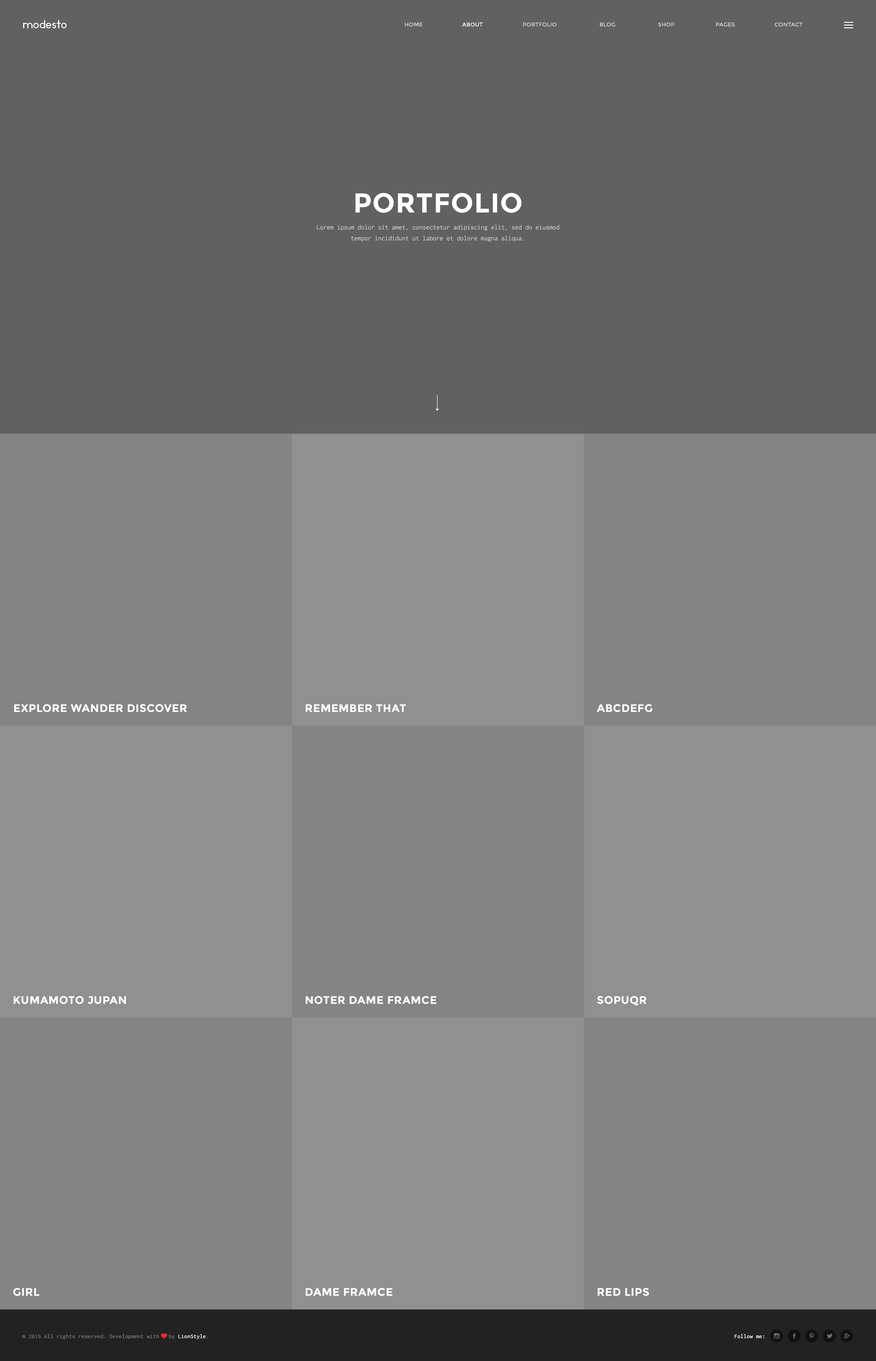
<style>
.page{position:relative;width:876px;height:1361px;background:#848484}
.page>*{position:absolute;margin:0}
.t1{font:10.9px "Ikaros";letter-spacing:0.025em;color:#ffffff}
.t2{font:5.5px "Montserrat-Regular";letter-spacing:0.025em;color:#d8d8d8;text-transform:uppercase}
.t3{font:5.5px "Montserrat-Regular";letter-spacing:0.025em;color:#ffffff;text-transform:uppercase}
.t4{font:27.4px "Montserrat-Bold";letter-spacing:0.025em;color:#ffffff;text-transform:uppercase}
.t5{font:6.8px/10.9px "Inconsolata";color:#d8d8d8}
.t6{font:10.9px "Montserrat-Bold";letter-spacing:0.025em;color:#ffffff;text-transform:uppercase}
.t7{font:5.9px "Inconsolata";letter-spacing:0.025em;color:#777777}
.t8{font:5.9px "FontAwesome";letter-spacing:0.025em;color:#fe2b2b}
.t9{font:5.9px "Inconsolata";letter-spacing:0.025em;color:#ffffff}
.t10{font:5.9px "Inconsolata";letter-spacing:0.025em;color:#fefefe}
</style>
<div class="page">
<p class="t1" style="left:23px;top:20px;width:44px;height:8px">modesto</p>
<p class="t2" style="left:405px;top:22px;width:397px;height:4px">home                                                             portfolio                          Blog                          shop                         pages                        contact</p>
<p class="t3" style="left:462px;top:22px;width:21px;height:4px">about</p>
<p class="t4" style="left:355px;top:193px;width:166px;height:20px">portfolio</p>
<p class="t5" style="left:317px;top:225px;width:242px;height:17px;text-align:center">Lorem ipsum dolor sit amet, consectetur adipiscing elit, sed do eiusmod tempor incididunt ut labore et dolore magna aliqua.</p>
<p class="t6" style="left:14px;top:704px;width:173px;height:9px">explore wander discover</p>
<p class="t6" style="left:306px;top:704px;width:100px;height:8px">remember that</p>
<p class="t6" style="left:597px;top:704px;width:55px;height:9px">abcdefg</p>
<p class="t6" style="left:14px;top:996px;width:112px;height:9px">kumamoto jupan</p>
<p class="t6" style="left:306px;top:996px;width:131px;height:9px">noter dame framce</p>
<p class="t6" style="left:597px;top:996px;width:50px;height:10px">sopuqr</p>
<p class="t6" style="left:13px;top:1288px;width:26px;height:9px">girl</p>
<p class="t6" style="left:306px;top:1288px;width:86px;height:9px">dame framce</p>
<p class="t6" style="left:598px;top:1288px;width:51px;height:9px">red lips</p>
<p class="t7" style="left:22px;top:1334px;width:186px;height:5px">© 2015 All rights reserved. Development with <span class="t8">♥ </span>by <span class="t9">LionStyle</span>.</p>
<p class="t10" style="left:735px;top:1334px;width:29px;height:5px">Follow me:</p>
</div>
